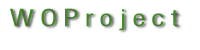
<style>
.page{position:relative;width:200px;height:50px;background:#ffffff}
.page>*{position:absolute;margin:0}
.t1{font:23.9px "HelmetCondensedBold";letter-spacing:0.2em;color:#3b9a17;scale:1.33 1}
</style>
<div class="page">
<p class="t1" style="left:10px;top:8px;width:169px;height:23px">WOProject</p>
</div>
